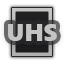
<style>
.page{position:relative;width:64px;height:64px;background:#ffffff}
.page>*{position:absolute;margin:0}
.t1{font:24px "SegoeUIBlack";letter-spacing:-0.01em;color:#c4c4c4}
</style>
<div class="page">
<p class="t1" style="left:8px;top:24px;width:49px;height:17px">UHS</p>
</div>
